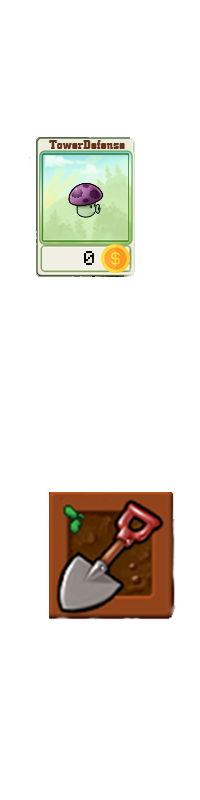
<style>
.page{position:relative;width:200px;height:800px;background:#ffffff}
.page>*{position:absolute;margin:0}
.t1{font:13px "UVNThanhPhoNang";color:#633219}
</style>
<div class="page">
<p class="t1" style="left:49px;top:140px;width:76px;height:9px">TowerDefense</p>
</div>
